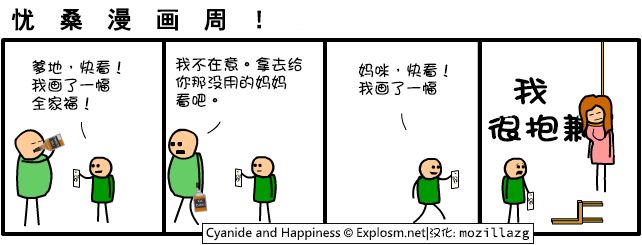
<style>
.page{position:relative;width:642px;height:245px;background:#ffffff}
.page>*{position:absolute;margin:0}
.t1{font:24px "SimHei";letter-spacing:0.98em;color:#000000;font-weight:bold}
.t2{font:16px/18px "DFGirl";color:#000000}
.t3{font:30.9px/37.1px "DFGirl";color:#000000;font-weight:bold;scale:1.19 1}
</style>
<div class="page">
<p class="t1" style="left:11px;top:8px;width:250px;height:23px">忧桑漫画周！</p>
<p class="t2" style="left:31px;top:60px;width:90px;height:51px">爹地，快看！<br>我画了一幅<br>全家福！</p>
<p class="t2" style="left:175px;top:57px;width:127px;height:50px">我不在意。拿去给<br>你那没用的妈妈<br>看吧。</p>
<p class="t2" style="left:358px;top:63px;width:90px;height:33px">妈咪，快看！<br>我画了一幅</p>
<p class="t3" style="left:488px;top:76px;width:108px;height:67px">我<br>很抱歉</p>
</div>
